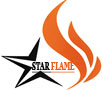
<style>
.page{position:relative;width:102px;height:90px;background:#ffffff}
.page>*{position:absolute;margin:0}
.t1{font:10.7px "Georgia-Bold";color:#e85d1a;text-decoration:underline;scale:0.57 1}
.t2{font:10.7px "Georgia-Bold";color:#090909;text-decoration:underline;scale:0.57 1}
</style>
<div class="page">
<p class="t1" style="left:32px;top:62px;width:43px;height:11px"><span class="t2">STAR </span>FLAME</p>
</div>
